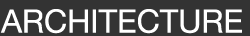
<style>
.page{position:relative;width:250px;height:36px;background:#333333}
.page>*{position:absolute;margin:0}
.t1{font:32.1px "HelveticaNeue";color:#ffffff}
</style>
<div class="page">
<p class="t1" style="left:0px;top:9px;width:242px;height:25px">ARCHITECTURE</p>
</div>
